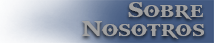
<style>
.page{position:relative;width:214px;height:43px}
.page>*{position:absolute;margin:0}
.t1{font:24px "GodOfWar";color:#a1a1a1}
</style>
<div class="page">
<p class="t1" style="left:128px;top:2px;width:75px;height:18px">Sobre</p>
<p class="t1" style="left:82px;top:21px;width:122px;height:18px">Nosotros</p>
</div>
